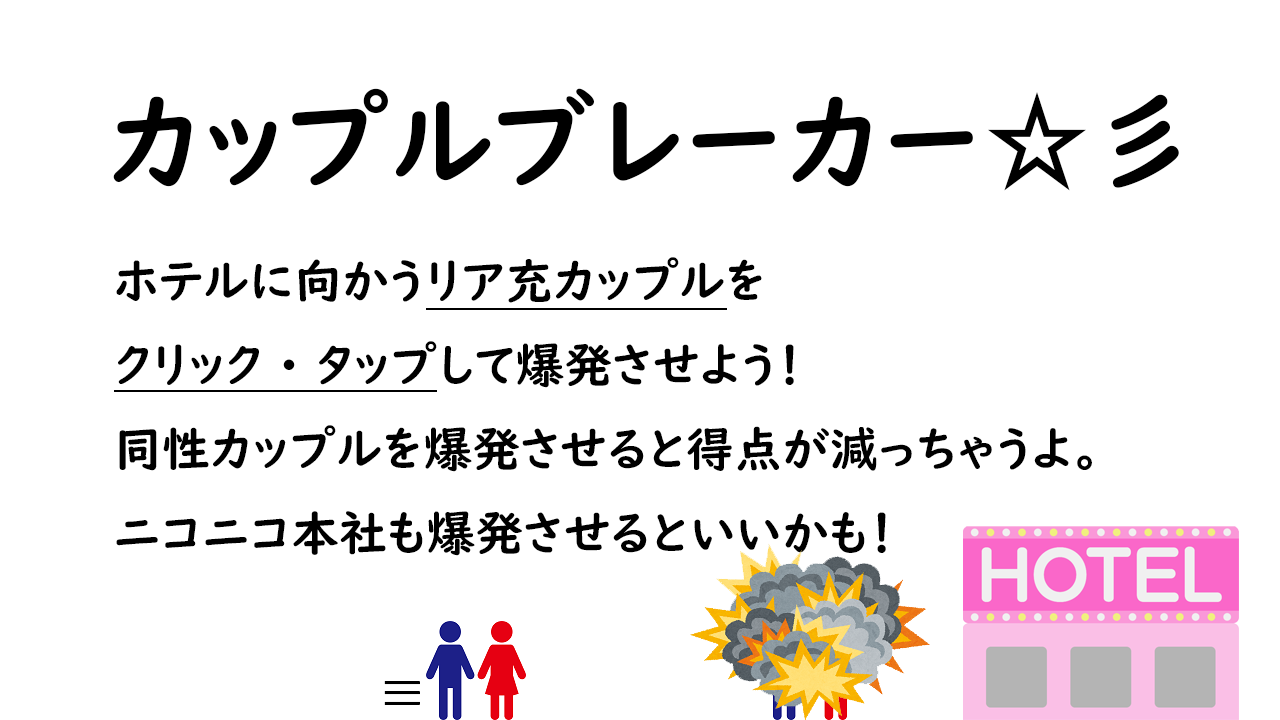
<style>
.page{position:relative;width:1280px;height:720px;background:#ffffff}
.page>*{position:absolute;margin:0}
.t1{font:108px "UDDigiKyokashoNK-B";color:#000000}
.t2{font:48px "UDDigiKyokashoNK-B";color:#000000}
.t3{font:48px "KozGoPr6N-Regular";color:#000000}
</style>
<div class="page">
<p class="t1" style="left:113px;top:88px;width:1066px;height:103px">カップルブレーカー☆彡</p>
<p class="t2" style="left:116px;top:257px;width:976px;height:299px">ホテルに向かうリア充カップルを<br>クリック・タップして爆発させよう！<br>同性カップルを爆発させると得点が減っちゃうよ。<br>ニコニコ本社も爆発させるといいかも！</p>
<p class="t3" style="left:384px;top:681px;width:36px;height:24px">≡</p>
</div>
